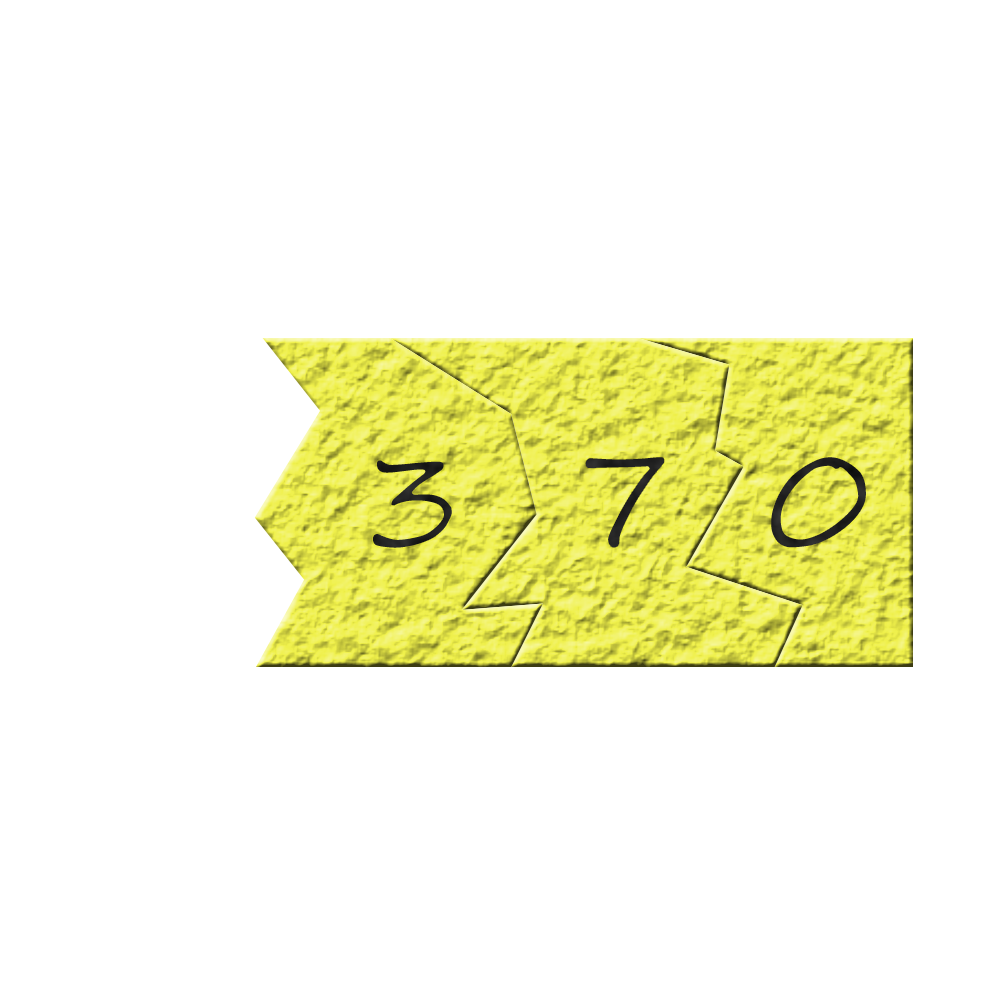
<style>
.page{position:relative;width:1000px;height:1000px;background:#ffffff}
.page>*{position:absolute;margin:0}
.t1{font:140px "SegoeScript"}
.t2{font:140px "SegoeScript";color:#242424}
</style>
<div class="page">
<p class="t1" style="left:371px;top:458px;width:83px;height:92px">3</p>
<p class="t2" style="left:584px;top:456px;width:82px;height:93px">7</p>
<p class="t1" style="left:769px;top:455px;width:99px;height:95px">0</p>
</div>
